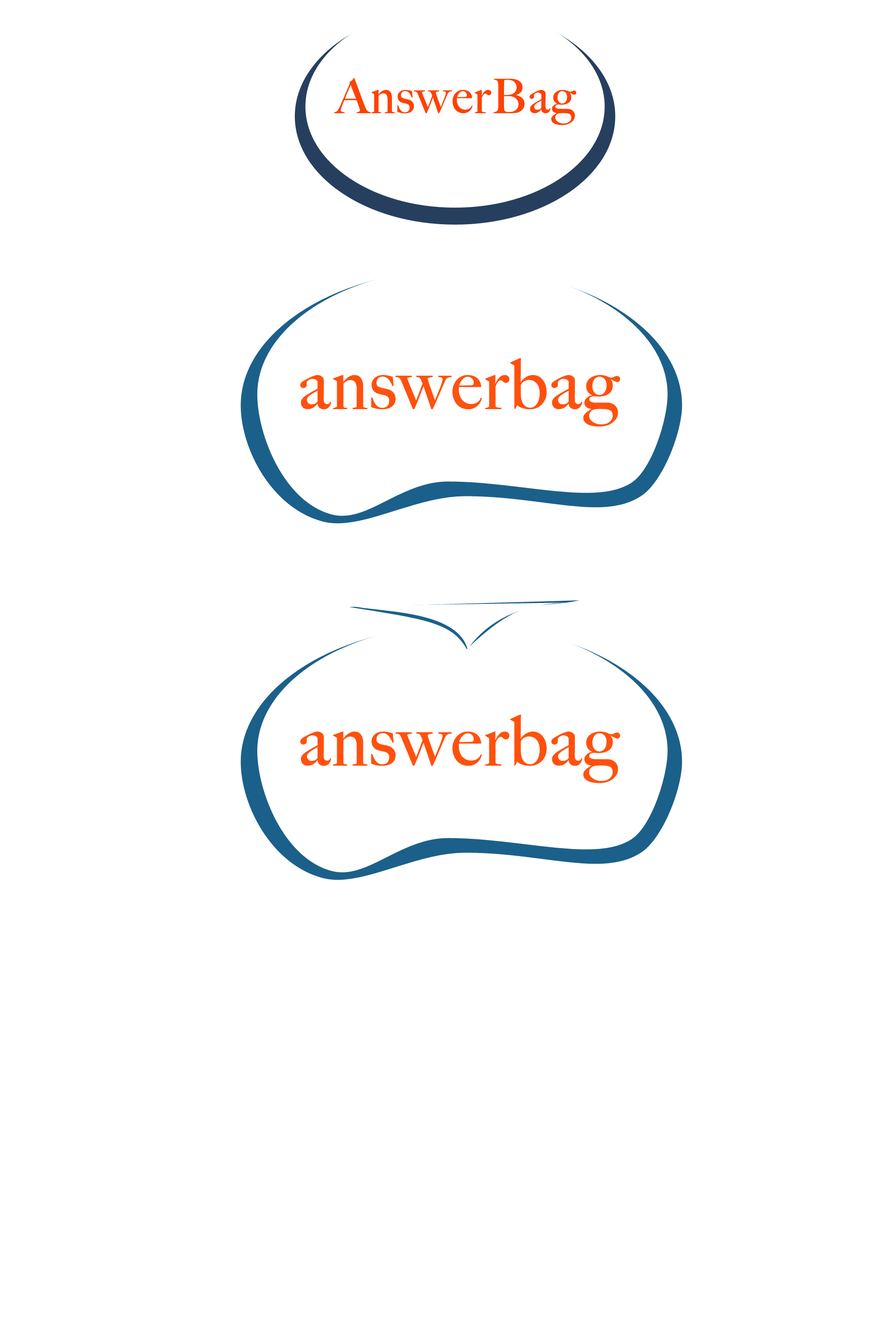
<style>
.page{position:relative;width:892px;height:1337px;background:#ffffff}
.page>*{position:absolute;margin:0}
.t1{font:47.3px "BigCaslon-Medium";color:#fe4201;font-weight:bold}
.t2{font:69.5px "BigCaslon-Medium";color:#ff510d;font-weight:bold}
</style>
<div class="page">
<p class="t1" style="left:334px;top:78px;width:242px;height:47px">AnswerBag</p>
<p class="t2" style="left:300px;top:358px;width:320px;height:69px">answerbag</p>
<p class="t2" style="left:300px;top:715px;width:320px;height:68px">answerbag</p>
</div>
